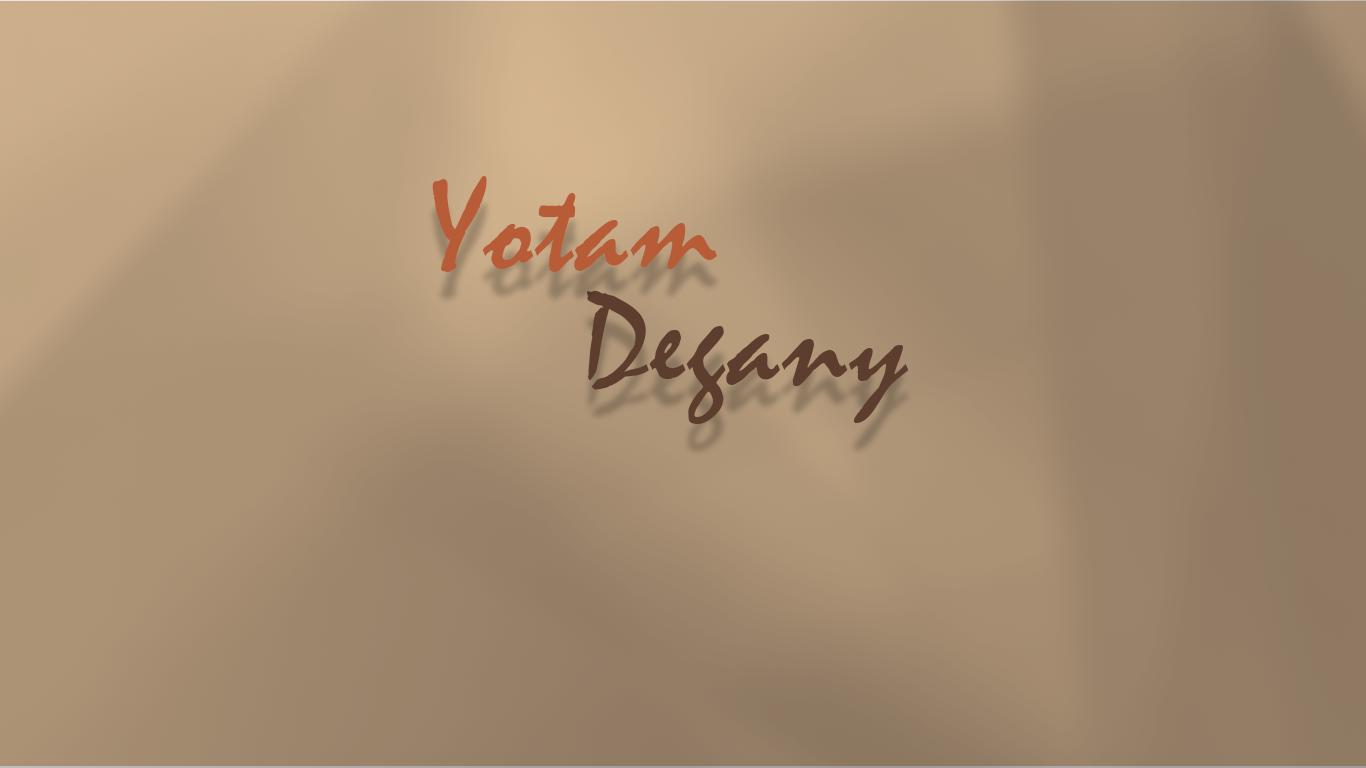
<style>
.page{position:relative;width:1366px;height:768px}
.page>*{position:absolute;margin:0}
.t1{font:135.9px "Mistral";letter-spacing:0.03em;color:#b85c38}
.t2{font:134.9px "Mistral";letter-spacing:0.03em;color:#5c3d2e}
</style>
<div class="page">
<p class="t1" style="left:432px;top:176px;width:286px;height:96px">Yotam</p>
<p class="t2" style="left:586px;top:290px;width:323px;height:134px">Degany</p>
</div>
